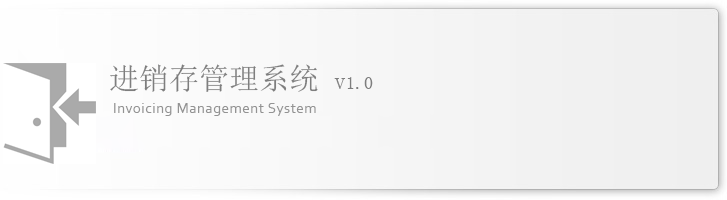
<style>
.page{position:relative;width:727px;height:200px}
.page>*{position:absolute;margin:0}
.t1{font:30px "SimSun";color:#7e7e7e}
.t2{font:24px "SimSun";color:#7e7e7e}
.t3{font:18px "SimSun";color:#7e7e7e}
.t4{font:15px "Corbel";letter-spacing:0.03em;color:#939393}
</style>
<div class="page">
<p class="t1" style="left:110px;top:64px;width:263px;height:28px">进销存管理系统 <span class="t2">v</span><span class="t3">1.0</span></p>
<p class="t4" style="left:114px;top:103px;width:202px;height:13px">Invoicing Management System</p>
</div>
